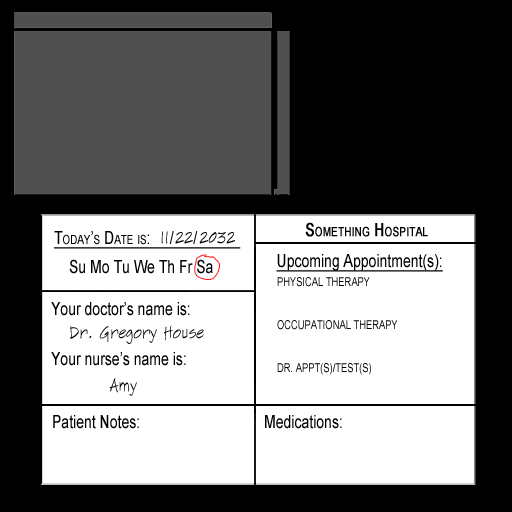
<style>
.page{position:relative;width:512px;height:512px;background:#000000}
.page>*{position:absolute;margin:0}
.t1{font:18px "ArialMT";color:#000000;font-variant:small-caps;font-weight:bold;scale:0.78 1}
.t2{font:18px "ArialMT";color:#000000;font-variant:small-caps;text-decoration:underline;scale:0.78 1}
.t3{font:18px "SketchFlowPrint";color:#000000;scale:0.78 1}
.t4{font:18px "ArialMT";color:#000000;text-decoration:underline;scale:0.78 1}
.t5{font:18px "ArialMT";color:#000000;scale:0.78 1}
.t6{font:12px "ArialMT";color:#000000;scale:0.78 1}
</style>
<div class="page">
<p class="t1" style="left:305px;top:222px;width:123px;height:15px">Something Hospital</p>
<p class="t2" style="left:54px;top:231px;width:187px;height:18px">Today’s Date is:     /     /</p>
<p class="t3" style="left:161px;top:231px;width:74px;height:13px">11 22 2032</p>
<p class="t4" style="left:276px;top:254px;width:167px;height:18px">Upcoming Appointment(s):</p>
<p class="t5" style="left:69px;top:259px;width:144px;height:15px">Su Mo Tu We Th Fr Sa</p>
<p class="t6" style="left:277px;top:277px;width:121px;height:98px">PHYSICAL THERAPY<br><br><br>OCCUPATIONAL THERAPY<br><br><br>DR. APPT(S)/TEST(S)</p>
<p class="t5" style="left:51px;top:302px;width:139px;height:14px">Your doctor’s name is:</p>
<p class="t3" style="left:70px;top:325px;width:134px;height:19px">Dr. Gregory House</p>
<p class="t5" style="left:51px;top:352px;width:135px;height:14px">Your nurse’s name is:</p>
<p class="t3" style="left:109px;top:378px;width:28px;height:18px">Amy</p>
<p class="t5" style="left:53px;top:415px;width:86px;height:14px">Patient Notes:</p>
<p class="t5" style="left:265px;top:415px;width:77px;height:14px">Medications:</p>
</div>
